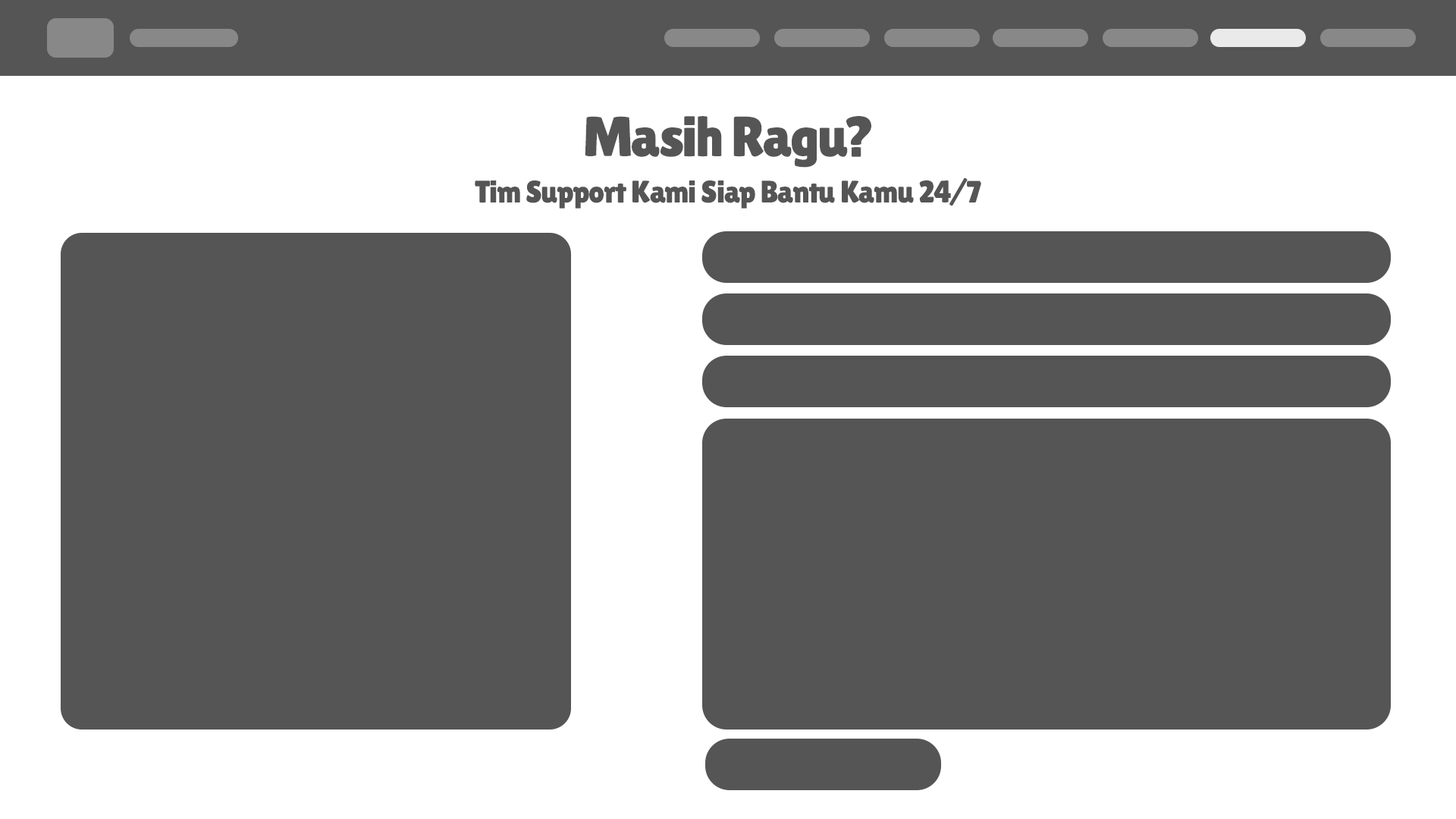
<style>
.page{position:relative;width:1456px;height:819px;background:#555555}
.page>*{position:absolute;margin:0}
.t1{font:56.5px "LilitaOne";letter-spacing:-0.025em;color:#555555}
.t2{font:31.2px "LilitaOne";letter-spacing:-0.025em;color:#555555}
</style>
<div class="page">
<p class="t1" style="left:585px;top:116px;width:286px;height:52px">Masih Ragu?</p>
<p class="t2" style="left:475px;top:177px;width:506px;height:32px">Tim Support Kami Siap Bantu Kamu 24/7</p>
</div>
